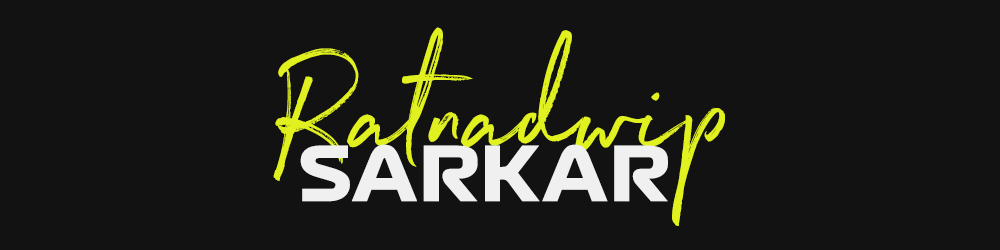
<style>
.page{position:relative;width:1000px;height:250px;background:#121212}
.page>*{position:absolute;margin:0}
.t1{font:141.9px "Northwell";letter-spacing:0.025em;color:#e0f11f}
.t2{font:73.8px "Formula1-Display-Bold";letter-spacing:0.025em;color:#f0f0f0}
</style>
<div class="page">
<p class="t1" style="left:273px;top:27px;width:452px;height:199px">Ratnadwip</p>
<p class="t2" style="left:300px;top:144px;width:368px;height:58px">SARKAR</p>
</div>
